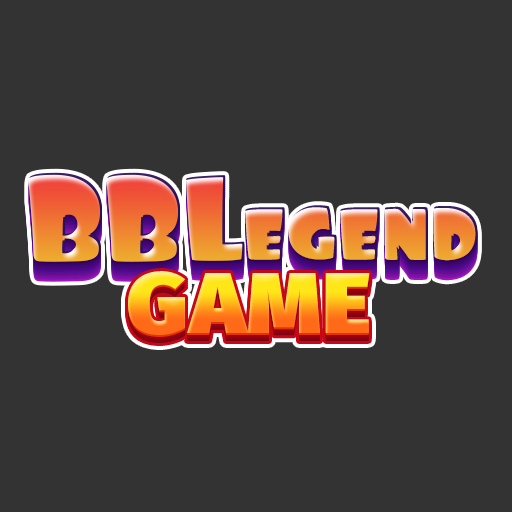
<style>
.page{position:relative;width:512px;height:512px;background:#333333}
.page>*{position:absolute;margin:0}
.t1{font:95px "Foo-Regular";letter-spacing:-0.02em;scale:1.05 1}
.t2{font:122.7px "Foo-Regular";letter-spacing:-0.02em;scale:1.05 1}
.t3{font:87.1px "FiraSans-Ultra";letter-spacing:0.025em;scale:1.05 1}
</style>
<div class="page">
<p class="t1" style="left:28px;top:172px;width:450px;height:90px"><span class="t2">BBL</span>egend</p>
<p class="t3" style="left:128px;top:271px;width:242px;height:64px">GAME</p>
</div>
